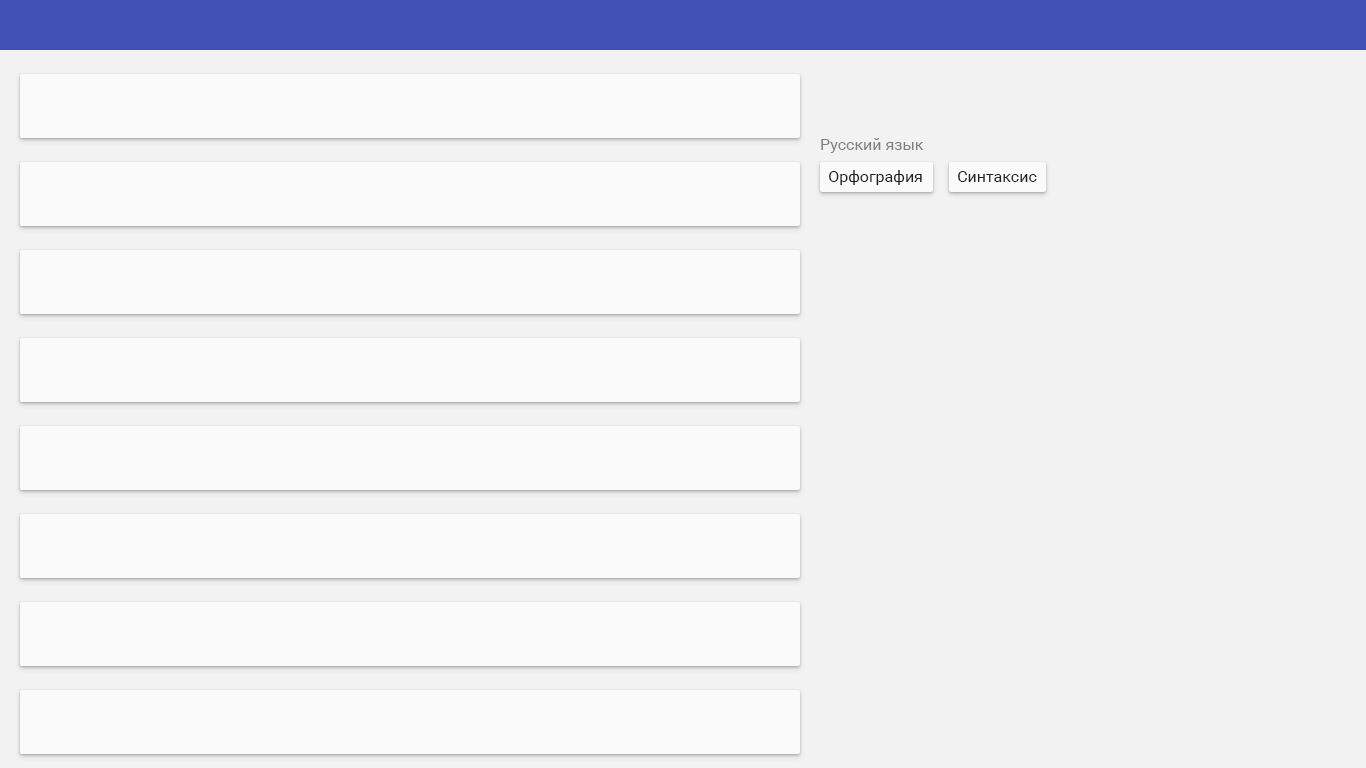
<style>
.page{position:relative;width:1366px;height:768px;background:#f2f2f2}
.page>*{position:absolute;margin:0}
.t1{font:16px "Roboto-Regular";color:#808080}
.t2{font:16px "Roboto-Regular";color:#212121}
</style>
<div class="page">
<p class="t1" style="left:821px;top:138px;width:103px;height:15px">Русский язык</p>
<p class="t2" style="left:829px;top:170px;width:93px;height:15px">Орфография</p>
<p class="t2" style="left:958px;top:171px;width:79px;height:11px">Синтаксис</p>
</div>
